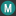
<style>
.page{position:relative;width:16px;height:16px;background:#1c8b86}
.page>*{position:absolute;margin:0}
.t1{font:11px "ArialNarrow";letter-spacing:-0.01em;color:#ffffff;font-weight:bold}
</style>
<div class="page">
<p class="t1" style="left:4px;top:4px;width:8px;height:9px">M</p>
</div>
